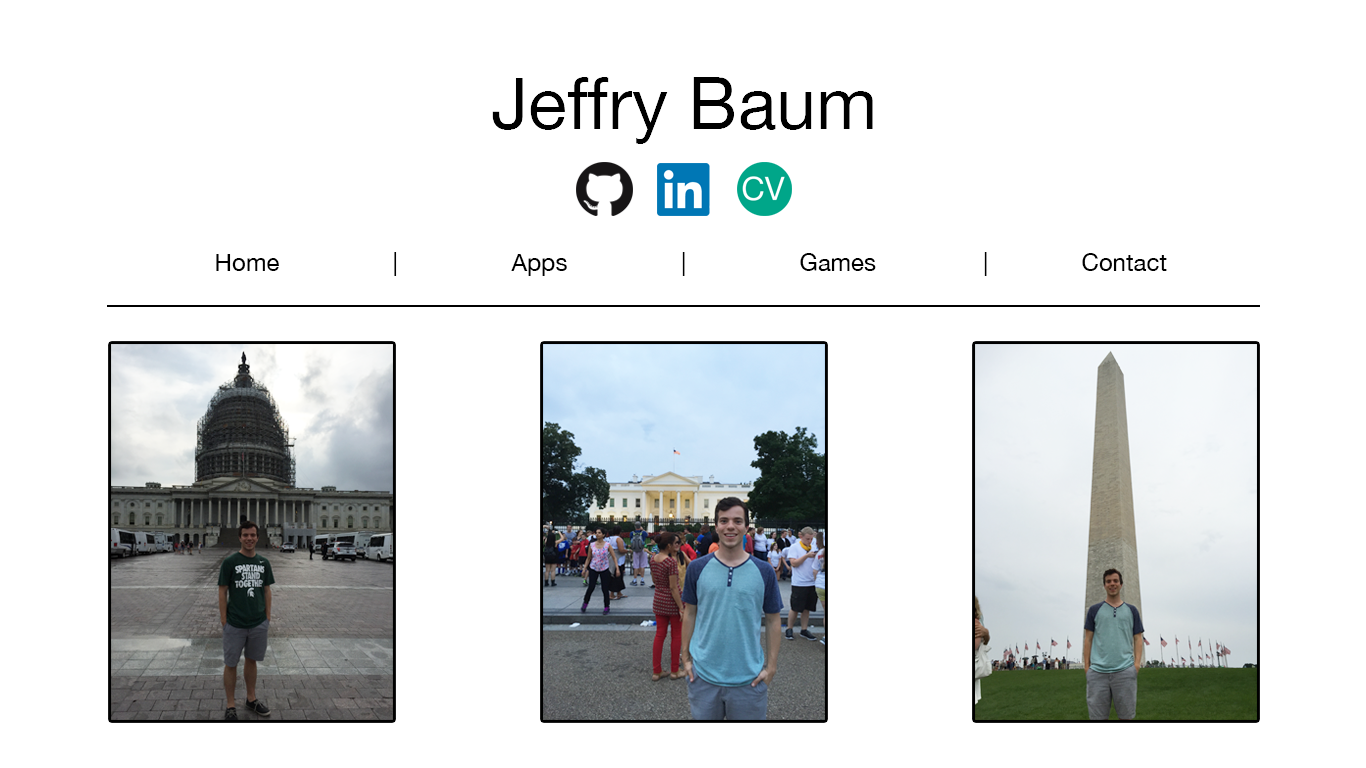
<style>
.page{position:relative;width:1366px;height:768px;background:#ffffff}
.page>*{position:absolute;margin:0}
.t1{font:72px "HelveticaNeue";color:#000000}
.t2{font:24px "HelveticaNeue";color:#000000}
</style>
<div class="page">
<p class="t1" style="left:492px;top:77px;width:381px;height:67px">Jeffry Baum</p>
<p class="t2" style="left:216px;top:252px;width:951px;height:24px">Home                 |                 Apps                 |                 Games                |              Contact</p>
</div>
